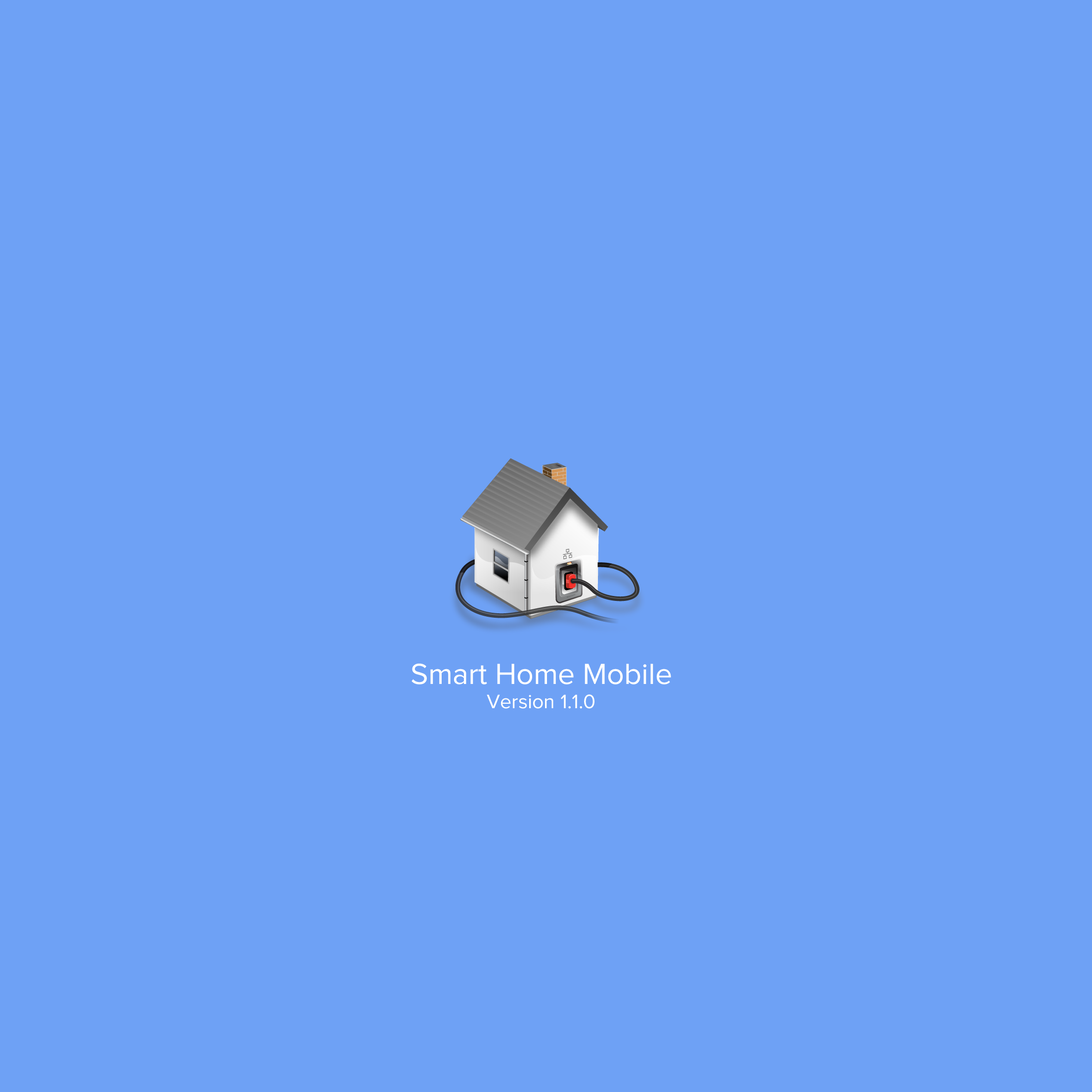
<style>
.page{position:relative;width:1092px;height:1092px;background:#6ea1f5}
.page>*{position:absolute;margin:0}
.t1{font:30.2px "ProximaNova-Regular";color:#ffffff}
.t2{font:20.3px "ProximaNova-Regular";color:#ffffff}
</style>
<div class="page">
<p class="t1" style="left:411px;top:663px;width:260px;height:46px;text-align:center">Smart Home Mobile<br><span class="t2">Version 1.1.0</span></p>
</div>
